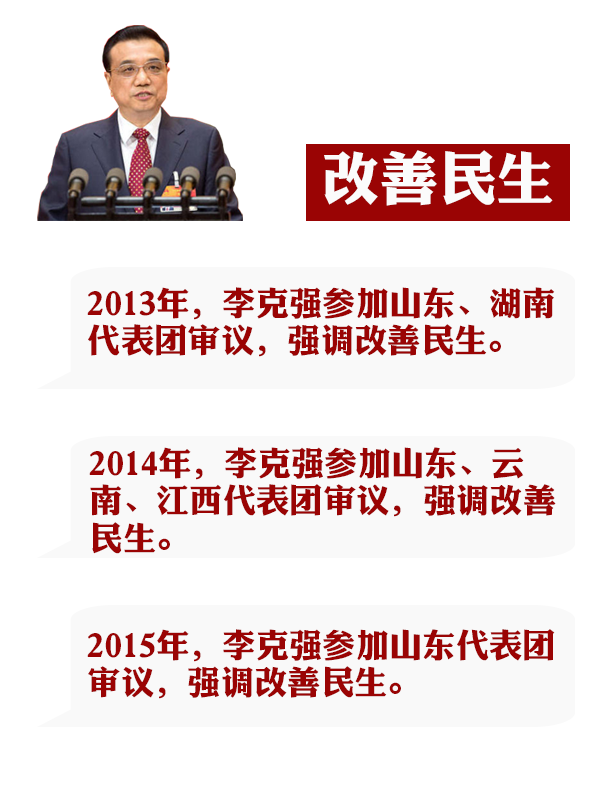
<style>
.page{position:relative;width:600px;height:800px;background:#ffffff}
.page>*{position:absolute;margin:0}
.t1{font:58.3px "DFLiJinHeiW8";color:#fbfbfb}
.t2{font:33.3px/37.5px "DFLiJinHeiW8";color:#9a0404}
</style>
<div class="page">
<p class="t1" style="left:324px;top:150px;width:229px;height:56px">改善民生</p>
<p class="t2" style="left:87px;top:287px;width:468px;height:70px">2013年，李克强参加山东、湖南代表团审议，强调改善民生。</p>
<p class="t2" style="left:89px;top:447px;width:467px;height:107px">2014年，李克强参加山东、云南、江西代表团审议，强调改善民生。</p>
<p class="t2" style="left:87px;top:629px;width:468px;height:70px">2015年，李克强参加山东代表团审议，强调改善民生。</p>
</div>
